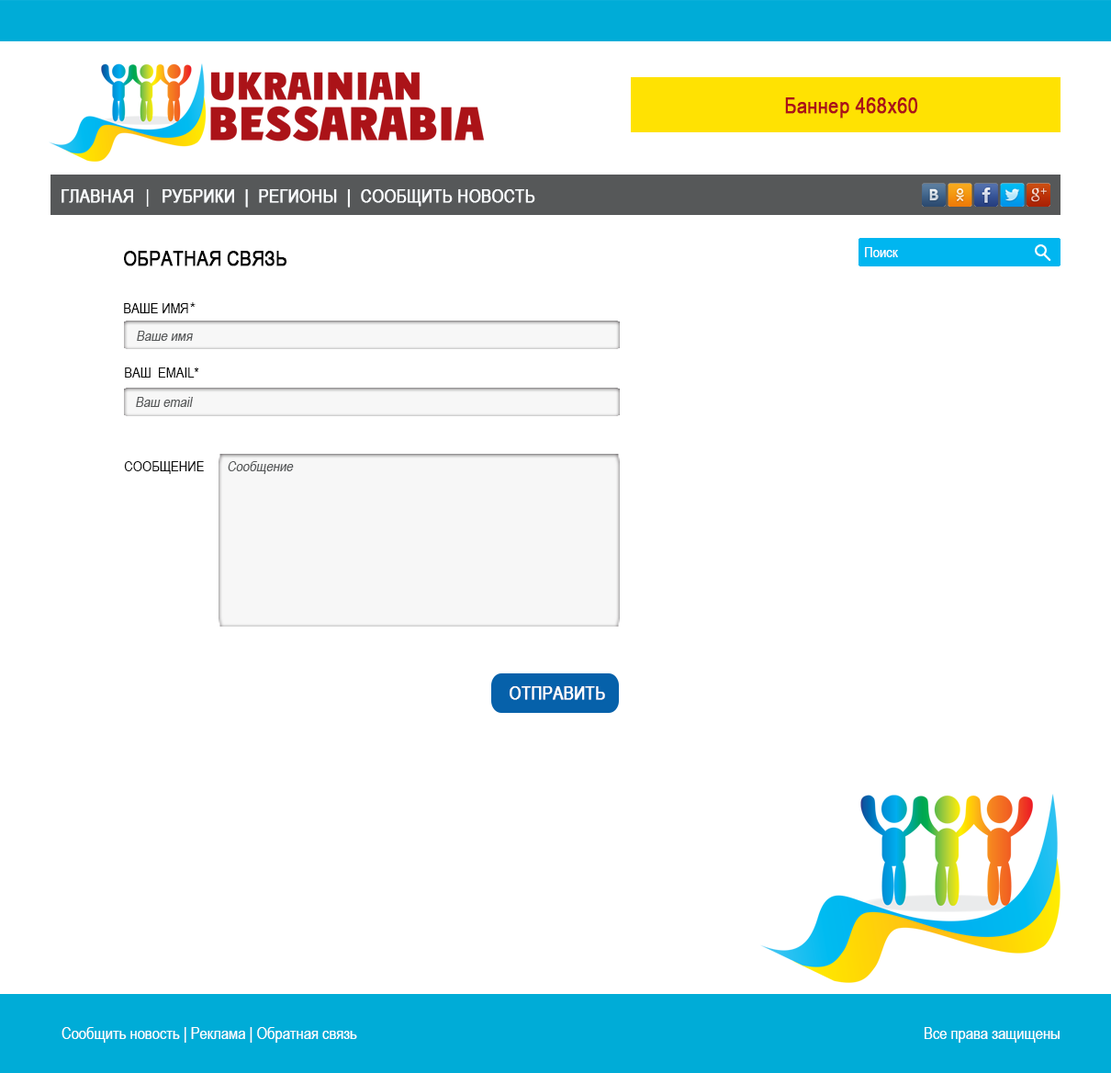
<style>
.page{position:relative;width:1111px;height:1073px;background:#ffffff}
.page>*{position:absolute;margin:0}
.t1{font:18.4px "ArialNarrow";color:#f8fbfd;text-transform:uppercase;font-weight:bold}
.t2{font:16.5px "HeliosCondBold";color:#f8fbfd;text-transform:uppercase}
.t3{font:18.4px "ArialNarrow";color:#f8fbfd;text-transform:uppercase}
.t4{font:20.8px "ArialNarrow";color:#040404;text-transform:uppercase;font-weight:bold}
.t5{font:14.7px "ArialNarrow";color:#ffffff}
.t6{font:14.7px "ArialNarrow";color:#040404}
.t7{font:14.7px "HeliosCond";color:#040404}
.t8{font:14.7px "ArialNarrow";color:#565859;font-style:italic}
.t9{font:14.7px "ArialNarrow";color:#0e0e0e}
.t10{font:18.4px "ArialNarrow";color:#fffefe;font-weight:bold}
.t11{font:16.5px "ArialNarrow";color:#ffffff}
</style>
<div class="page">
<p class="t1" style="left:62px;top:189px;width:71px;height:14px">Главная</p>
<p class="t1" style="left:146px;top:189px;width:390px;height:19px"><span class="t2">                      </span><span class="t3">|   </span>рубрики  |  регионы  |  сообщить новость</p>
<p class="t4" style="left:124px;top:251px;width:163px;height:15px">обратная связь</p>
<p class="t5" style="left:865px;top:247px;width:33px;height:10px">Поиск</p>
<p class="t6" style="left:124px;top:302px;width:72px;height:11px">ВАШЕ ИМЯ<span class="t7">*</span></p>
<p class="t8" style="left:137px;top:331px;width:56px;height:10px">Ваше имя</p>
<p class="t9" style="left:125px;top:367px;width:74px;height:11px">ВАШ  EMAIL*</p>
<p class="t8" style="left:136px;top:397px;width:57px;height:10px">Ваш email</p>
<p class="t9" style="left:124px;top:461px;width:80px;height:13px">СООБЩЕНИЕ</p>
<p class="t8" style="left:228px;top:461px;width:66px;height:13px">Сообщение</p>
<p class="t10" style="left:510px;top:686px;width:95px;height:14px">ОТПРАВИТЬ</p>
<p class="t11" style="left:62px;top:1027px;width:295px;height:16px">Сообщить новость | Реклама | Обратная связь</p>
<p class="t11" style="left:925px;top:1027px;width:135px;height:16px">Все права защищены</p>
</div>
